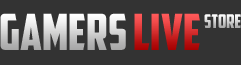
<style>
.page{position:relative;width:241px;height:65px;background:#333333}
.page>*{position:absolute;margin:0}
.t1{font:50px "AmericanCaptain"}
.t2{font:19px "AmericanCaptain"}
</style>
<div class="page">
<p class="t1" style="left:0px;top:13px;width:200px;height:37px">Gamers Live</p>
<p class="t2" style="left:204px;top:14px;width:37px;height:14px">store</p>
</div>
